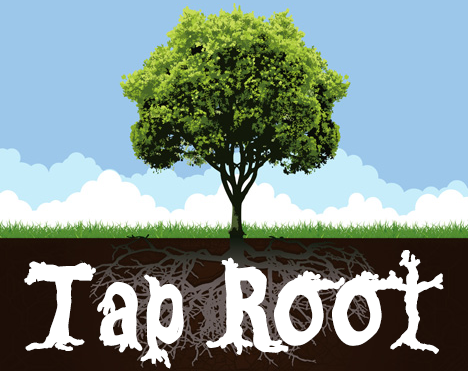
<style>
.page{position:relative;width:468px;height:371px;background:#9cc7ea}
.page>*{position:absolute;margin:0}
.t1{font:120px "CFOneTwoTrees-Regular";color:#ffffff;font-weight:bold}
</style>
<div class="page">
<p class="t1" style="left:24px;top:250px;width:420px;height:119px">Tap Root</p>
</div>
